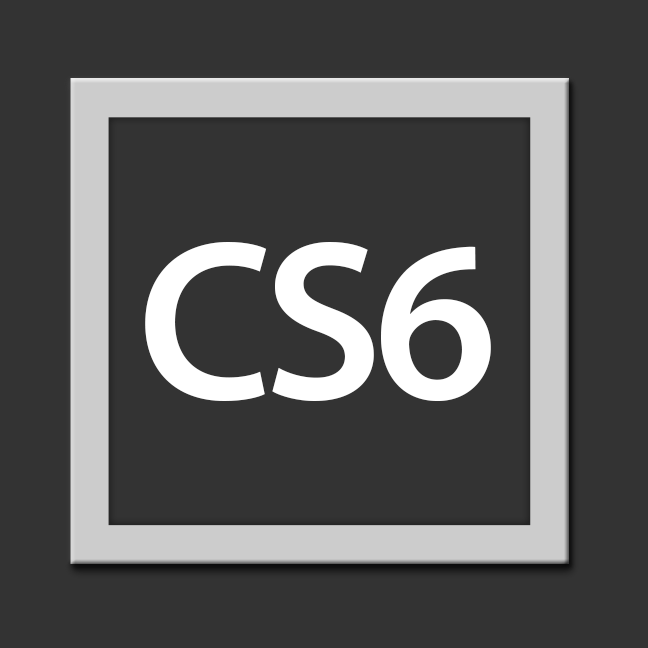
<style>
.page{position:relative;width:648px;height:648px;background:#333333}
.page>*{position:absolute;margin:0}
.t1{font:230.5px "MyriadPro-Semibold";letter-spacing:-0.04em;color:#ffffff}
</style>
<div class="page">
<p class="t1" style="left:145px;top:242px;width:346px;height:160px">CS6</p>
</div>
